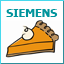
<style>
.page{position:relative;width:64px;height:64px;background:#ffffff}
.page>*{position:absolute;margin:0}
.t1{font:11px "Tahoma-Bold";color:#00949c}
</style>
<div class="page">
<p class="t1" style="left:6px;top:9px;width:52px;height:8px">SIEMENS</p>
</div>
